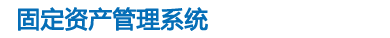
<style>
.page{position:relative;width:390px;height:38px;background:#ffffff}
.page>*{position:absolute;margin:0}
.t1{font:23.3px "MicrosoftYaHei";color:#056eb7;font-weight:bold}
</style>
<div class="page">
<p class="t1" style="left:18px;top:7px;width:190px;height:24px">固定资产管理系统</p>
</div>
